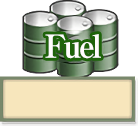
<style>
.page{position:relative;width:138px;height:126px;background:#ffffff}
.page>*{position:absolute;margin:0}
.t1{font:32px "RyuminPro-ExBold";letter-spacing:-0.08em;color:#fffdfd}
</style>
<div class="page">
<p class="t1" style="left:45px;top:34px;width:56px;height:25px">Fuel</p>
</div>
